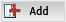
<style>
.page{position:relative;width:66px;height:22px}
.page>*{position:absolute;margin:0}
.t1{font:11.2px "Tahoma";letter-spacing:0.1em;color:#000000;scale:0.86 1}
</style>
<div class="page">
<p class="t1" style="left:29px;top:6px;width:19px;height:9px">Add</p>
</div>
